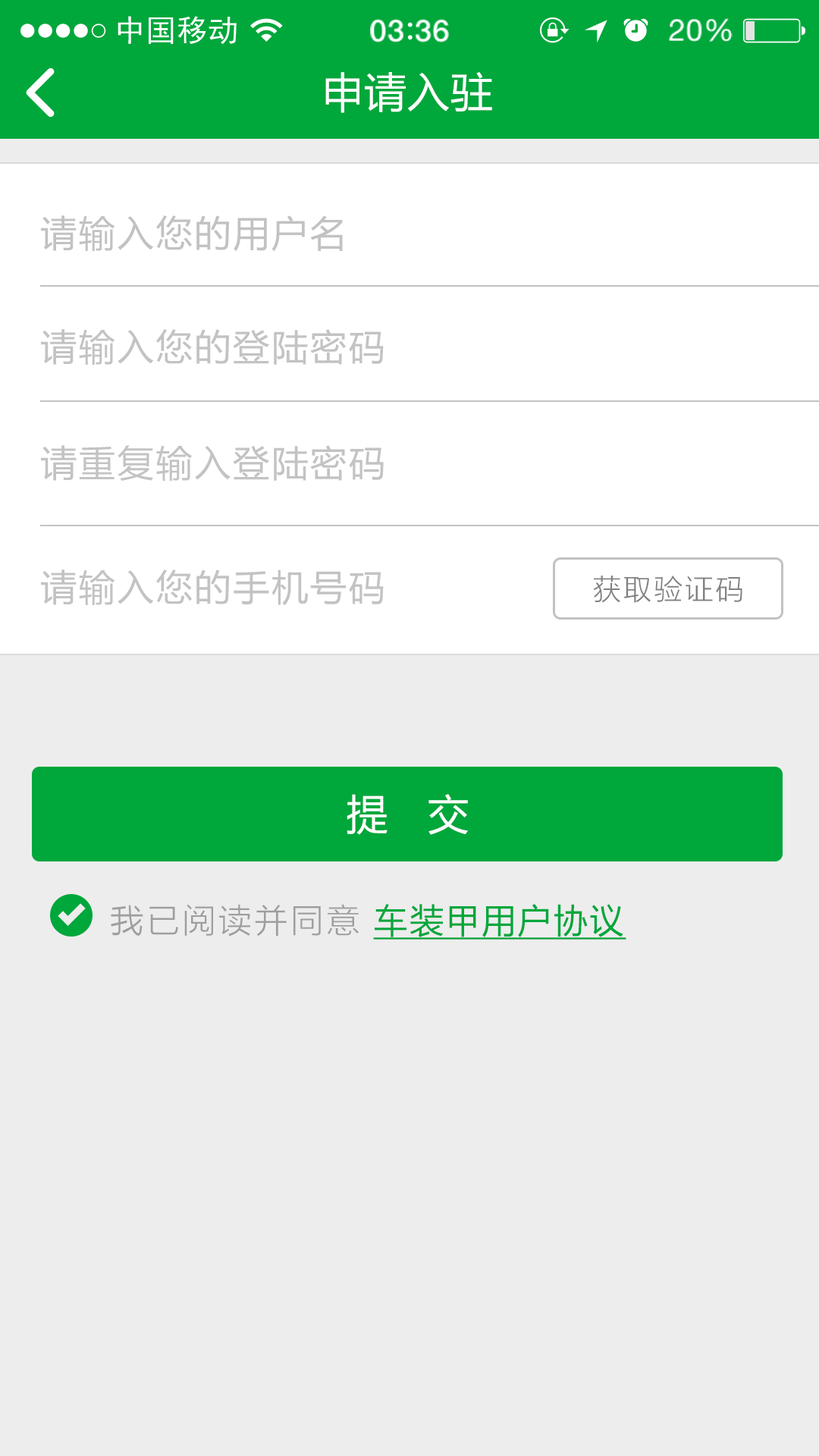
<style>
.page{position:relative;width:819px;height:1456px;background:#ededed}
.page>*{position:absolute;margin:0}
.t1{font:41.7px "MicrosoftYaHei";letter-spacing:0.02em;color:#ffffff}
.t2{font:36.4px "MicrosoftYaHei";letter-spacing:0.06em;color:#c2c2c2}
.t3{font:36.4px "MicrosoftYaHei";letter-spacing:0.06em;color:#c3c3c3}
.t4{font:29.4px "FZLTXHK";letter-spacing:0.06em;color:#818181}
.t5{font:34.2px "FZLTXHK";letter-spacing:0.06em;color:#9e9e9e}
.t6{font:34.2px "MicrosoftYaHei";letter-spacing:0.06em;color:#00a73b;text-decoration:underline}
</style>
<div class="page">
<p class="t1" style="left:325px;top:72px;width:167px;height:41px">申请入驻</p>
<p class="t2" style="left:41px;top:215px;width:302px;height:37px">请输入您的用户名</p>
<p class="t3" style="left:41px;top:329px;width:343px;height:36px">请输入您的登陆密码</p>
<p class="t3" style="left:41px;top:445px;width:343px;height:36px">请重复输入登陆密码</p>
<p class="t3" style="left:41px;top:570px;width:343px;height:36px">请输入您的手机号码</p>
<p class="t4" style="left:593px;top:576px;width:149px;height:27px">获取验证码</p>
<p class="t1" style="left:347px;top:794px;width:121px;height:41px">提   交</p>
<p class="t5" style="left:111px;top:904px;width:515px;height:36px">我已阅读并同意 <span class="t6">车装甲用户协议</span></p>
</div>
